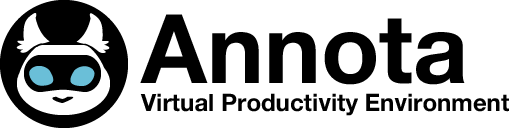
<style>
.page{position:relative;width:520px;height:128px;background:#ffffff}
.page>*{position:absolute;margin:0}
.t1{font:96px "HelveticaNeueBold";color:#000000}
.t2{font:24px "HelveticaNeueBold";color:#000000}
</style>
<div class="page">
<p class="t1" style="left:140px;top:14px;width:325px;height:71px">Annota</p>
<p class="t2" style="left:140px;top:93px;width:369px;height:23px">Virtual Productivity Environment</p>
</div>
